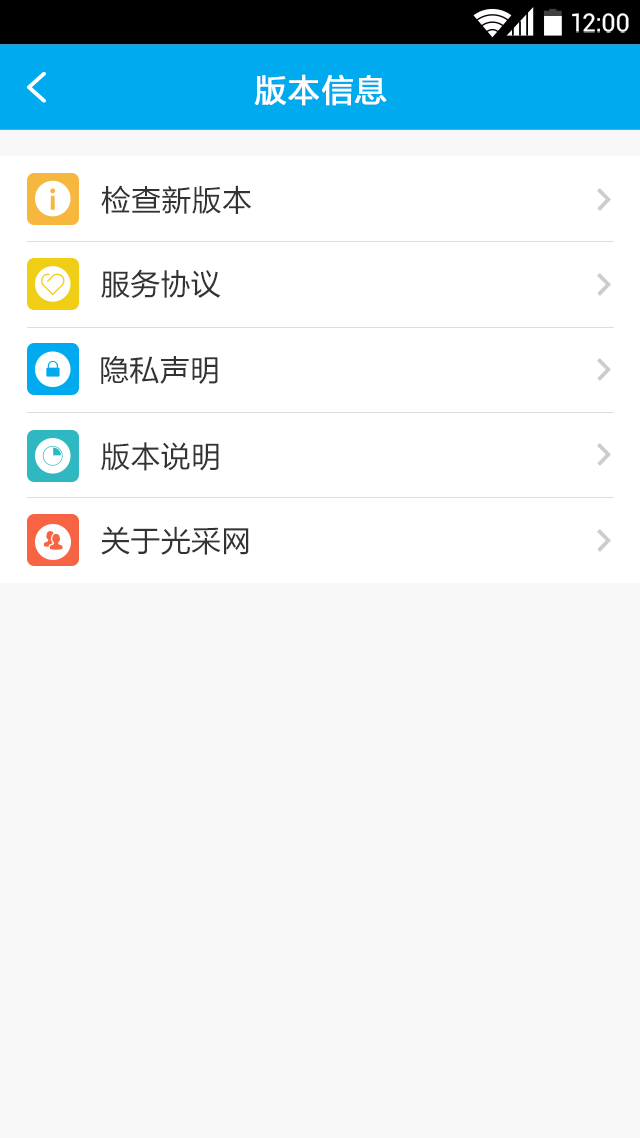
<style>
.page{position:relative;width:640px;height:1138px;background:#f8f8f8}
.page>*{position:absolute;margin:0}
.t1{font:24.9px "Roboto-Regular";color:#ffffff}
.t2{font:32px "FZLTHJW--GB1-0";letter-spacing:0.02em;color:#ffffff;font-weight:bold}
.t3{font:30.2px "FZLTHJW--GB1-0";color:#333333}
</style>
<div class="page">
<p class="t1" style="left:572px;top:13px;width:57px;height:20px">12:00</p>
<p class="t2" style="left:254px;top:74px;width:133px;height:32px">版本信息</p>
<p class="t3" style="left:101px;top:185px;width:150px;height:29px">检查新版本</p>
<p class="t3" style="left:101px;top:269px;width:120px;height:29px">服务协议</p>
<p class="t3" style="left:101px;top:356px;width:117px;height:28px">隐私声明</p>
<p class="t3" style="left:101px;top:442px;width:118px;height:29px">版本说明</p>
<p class="t3" style="left:101px;top:526px;width:148px;height:29px">关于光采网</p>
</div>
